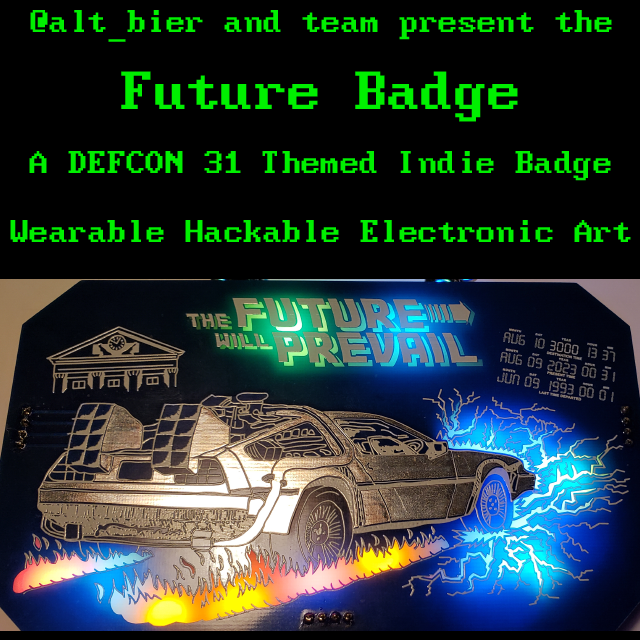
<style>
.page{position:relative;width:640px;height:640px;background:#000000}
.page>*{position:absolute;margin:0}
.t1{font:38.9px "Px437_ATT_PC6300";color:#00f000}
.t2{font:66.7px "Px437_ATT_PC6300";color:#00f000}
</style>
<div class="page">
<p class="t1" style="left:30px;top:10px;width:582px;height:32px">@alt_bier and team present the</p>
<p class="t2" style="left:121px;top:71px;width:397px;height:51px">Future Badge</p>
<p class="t1" style="left:29px;top:151px;width:582px;height:30px">A DEFCON 31 Themed Indie Badge</p>
<p class="t1" style="left:10px;top:220px;width:621px;height:22px">Wearable Hackable Electronic Art</p>
</div>
